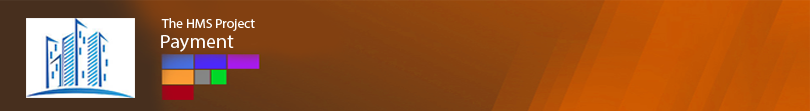
<style>
.page{position:relative;width:810px;height:111px}
.page>*{position:absolute;margin:0}
.t1{font:9.7px "MyriadPro-Regular";color:#ffffff;scale:1.06 1}
.t2{font:19.3px "MyriadPro-Regular";color:#ffffff;scale:1.04 1}
</style>
<div class="page">
<p class="t1" style="left:161px;top:18px;width:94px;height:13px">The HMS Project</p>
<p class="t2" style="left:161px;top:35px;width:73px;height:17px">Payment</p>
</div>
